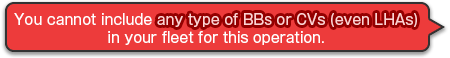
<style>
.page{position:relative;width:450px;height:58px;background:#ed3b3b}
.page>*{position:absolute;margin:0}
.t1{font:14px/18px "GothicMB101Pro-Regular";color:#ffd3d3}
.t2{font:14px/18px "GothicMB101Pro-Regular";color:#ffffff}
</style>
<div class="page">
<p class="t1" style="left:14px;top:13px;width:403px;height:32px;text-align:center"><span class="t2">You cannot include </span>any type of BBs or CVs (even LHAs)<br><span class="t2">in your fleet for this operation.</span></p>
<p class="t1" style="left:14px;top:13px;width:403px;height:32px;text-align:center"><span class="t2">You cannot include </span>any type of BBs or CVs (even LHAs)<br><span class="t2">in your fleet for this operation.</span></p>
</div>
